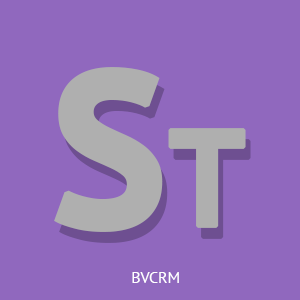
<style>
.page{position:relative;width:300px;height:300px;background:#9068be}
.page>*{position:absolute;margin:0}
.t1{font:219.4px "PTSans-Bold";letter-spacing:-0.01em;color:#afafaf;font-weight:bold}
.t2{font:137px "PTSans-Bold";letter-spacing:-0.01em;color:#afafaf;font-weight:bold}
.t3{font:16.5px "PTSans-Regular";letter-spacing:-0.01em;color:#ffffff}
</style>
<div class="page">
<p class="t1" style="left:54px;top:67px;width:192px;height:165px">S<span class="t2">T</span></p>
<p class="t3" style="left:132px;top:272px;width:47px;height:11px">BVCRM</p>
</div>
